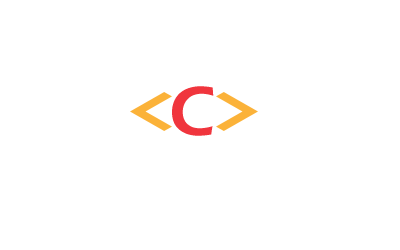
<style>
.page{position:relative;width:400px;height:250px;background:#ffffff}
.page>*{position:absolute;margin:0}
.t1{font:72px "ErasITC-Demi";letter-spacing:0.05em;color:#f0353d}
</style>
<div class="page">
<p class="t1" style="left:172px;top:86px;width:42px;height:50px">C</p>
</div>
